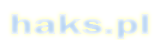
<style>
.page{position:relative;width:160px;height:40px;background:#ffffff}
.page>*{position:absolute;margin:0}
.t1{font:30px "FranklinGothic-Demi";color:#d4e5f7;scale:1.5 1}
</style>
<div class="page">
<p class="t1" style="left:11px;top:14px;width:138px;height:25px">haks.pl</p>
</div>
